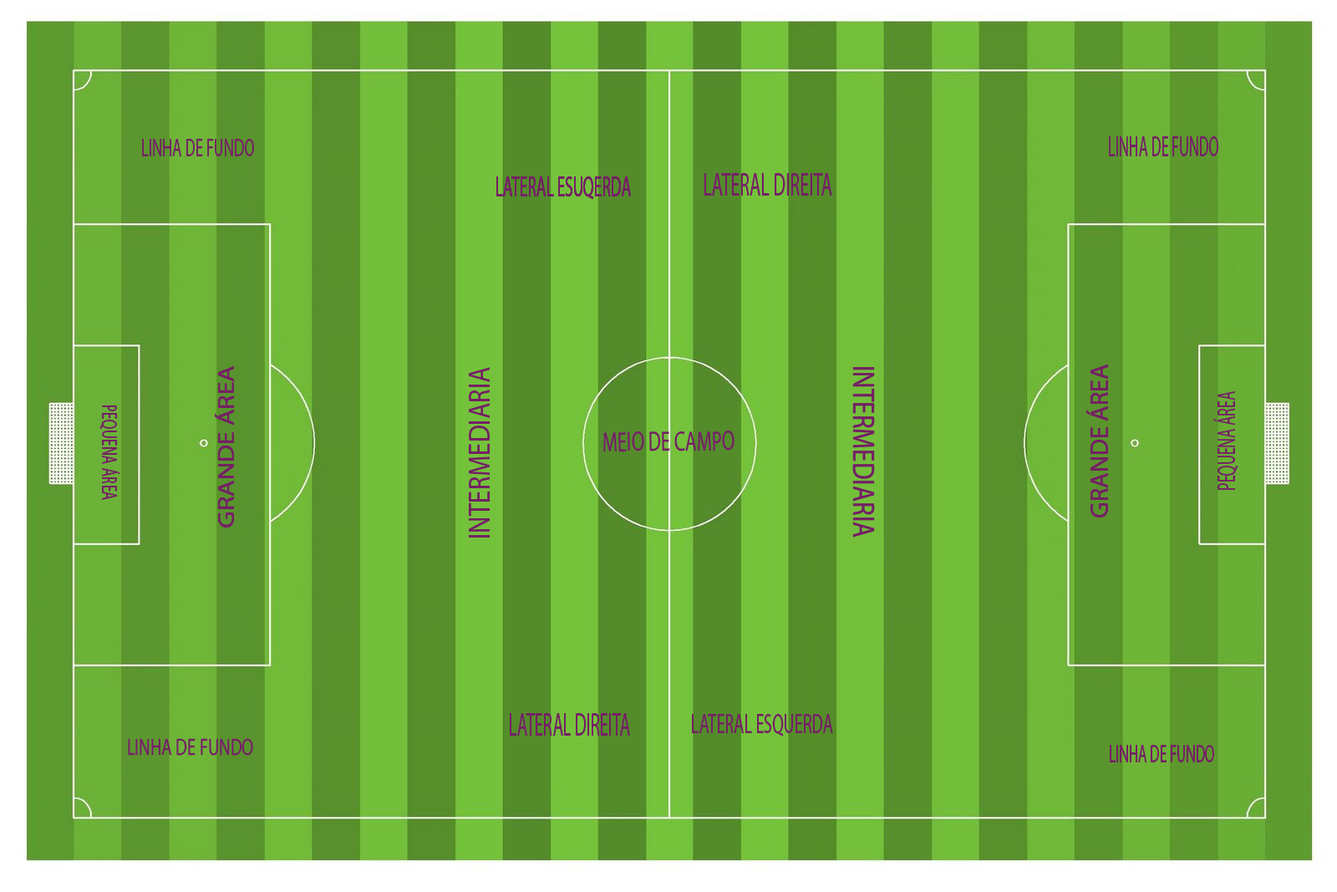
<style>
.page{position:relative;width:1337px;height:892px}
.page>*{position:absolute;margin:0}
.t1{font:21.6px "MyriadHebrew-Regular";color:#742063;scale:0.52 1}
.t2{font:19.4px "MyriadHebrew-Regular";color:#742063;scale:0.6 1}
.t3{font:24.3px "MyriadHebrew-Regular";color:#742063;scale:0.57 1}
.t4{font:21.6px "MyriadHebrew-Regular";color:#742063;scale:0.56 1}
.t5{font:19.4px "MyriadHebrew-Regular";color:#742063}
.t6{font:17.3px "MyriadHebrew-Regular";color:#742063;scale:1.16 1}
.t7{font:23.2px "MyriadHebrew-Regular";color:#742063;scale:0.84 1}
.t8{font:19.4px "MyriadHebrew-Regular";color:#742063;scale:0.58 1}
.t9{font:16.2px "MyriadHebrew-Regular";color:#742063;scale:0.68 1}
.t10{font:20.9px "MyriadHebrew-Regular";color:#742063;scale:0.68 1}
.t11{font:24.3px "MyriadHebrew-Regular";color:#742063;scale:0.53 1}
.t12{font:21px "MyriadHebrew-Regular";color:#742063;scale:0.6 1}
.t13{font:17.7px "MyriadHebrew-Regular";color:#742063;scale:0.73 1}
.t14{font:19.4px "MyriadHebrew-Regular";color:#742063;scale:0.56 1}
</style>
<div class="page">
<p class="t1" style="left:1109px;top:136px;width:110px;height:20px">LINHA DE FUNDO</p>
<p class="t2" style="left:142px;top:139px;width:112px;height:17px">LINHA DE FUNDO</p>
<p class="t3" style="left:704px;top:173px;width:128px;height:23px">LATERAL DIREITA</p>
<p class="t4" style="left:496px;top:176px;width:135px;height:24px">LATERAL ESUQERDA</p>
<p class="t4" style="left:496px;top:176px;width:135px;height:24px">LATERAL ESUQERDA</p>
<p class="t4" style="left:496px;top:176px;width:135px;height:24px">LATERAL ESUQERDA</p>
<p class="t5" style="left:1086px;top:364px;width:22px;height:153px;rotate:-90deg">GRANDE ÁREA</p>
<p class="t5" style="left:1086px;top:364px;width:22px;height:153px;rotate:-90deg">GRANDE ÁREA</p>
<p class="t5" style="left:1086px;top:364px;width:22px;height:153px;rotate:-90deg">GRANDE ÁREA</p>
<p class="t6" style="left:215px;top:366px;width:19px;height:161px;rotate:-90deg">GRANDE ÁREA</p>
<p class="t6" style="left:215px;top:366px;width:19px;height:161px;rotate:-90deg">GRANDE ÁREA</p>
<p class="t6" style="left:215px;top:366px;width:19px;height:161px;rotate:-90deg">GRANDE ÁREA</p>
<p class="t7" style="left:469px;top:367px;width:21px;height:170px;rotate:-90deg">INTERMEDIARIA</p>
<p class="t7" style="left:852px;top:367px;width:23px;height:170px;rotate:90deg">INTERMEDIARIA</p>
<p class="t7" style="left:852px;top:367px;width:23px;height:170px;rotate:90deg">INTERMEDIARIA</p>
<p class="t8" style="left:1214px;top:391px;width:25px;height:99px;rotate:-90deg">PEQUENA ÁREA</p>
<p class="t9" style="left:99px;top:405px;width:21px;height:95px;rotate:90deg">PEQUENA ÁREA</p>
<p class="t10" style="left:603px;top:430px;width:132px;height:22px;rotate:-1deg">MEIO DE CAMPO</p>
<p class="t11" style="left:510px;top:713px;width:120px;height:22px">LATERAL DIREITA</p>
<p class="t12" style="left:692px;top:714px;width:141px;height:22px">LATERAL ESQUERDA</p>
<p class="t13" style="left:128px;top:738px;width:125px;height:18px">LINHA DE FUNDO</p>
<p class="t14" style="left:1110px;top:745px;width:104px;height:17px">LINHA DE FUNDO</p>
</div>
